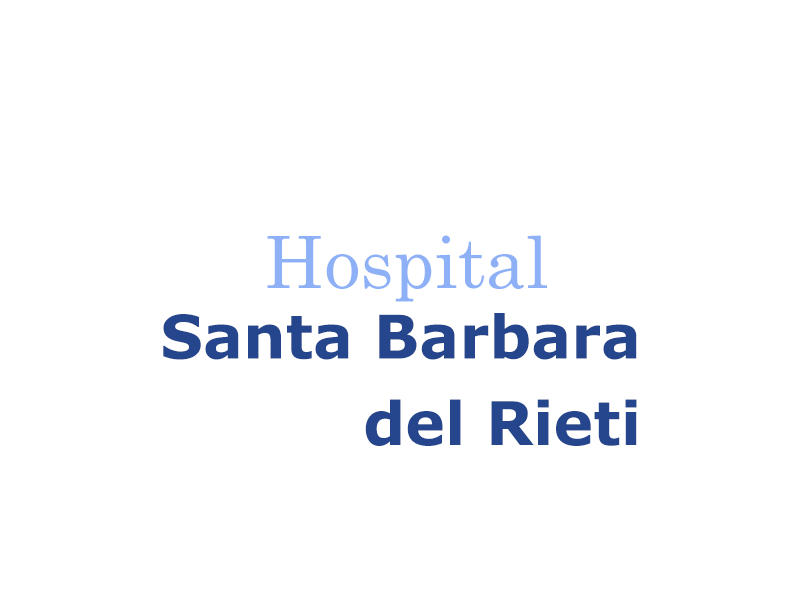
<style>
.page{position:relative;width:800px;height:600px;background:#ffffff}
.page>*{position:absolute;margin:0}
.t1{font:72px "CenturySchoolbook";color:#8eb0f7}
.t2{font:60px "Verdana-Bold";color:#25468c}
</style>
<div class="page">
<p class="t1" style="left:267px;top:235px;width:280px;height:67px">Hospital</p>
<p class="t2" style="left:163px;top:313px;width:474px;height:133px">Santa Barbara<br>del Rieti</p>
</div>
